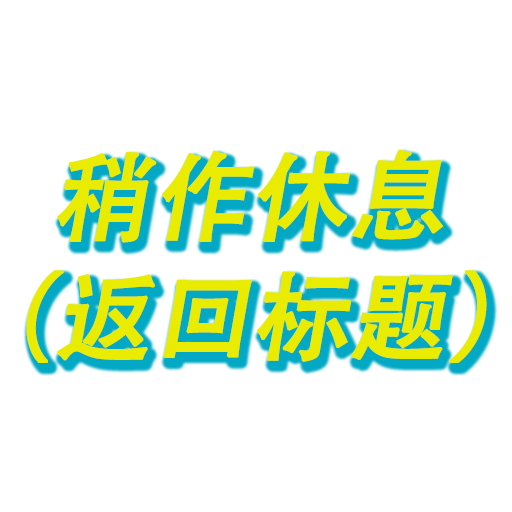
<style>
.page{position:relative;width:512px;height:512px;background:#ffffff}
.page>*{position:absolute;margin:0}
.t1{font:96px/120px "AdobeHeitiStd-Regular";color:#e9ec00;font-weight:bold;font-style:italic}
</style>
<div class="page">
<p class="t1" style="left:26px;top:149px;width:461px;height:214px">稍作休息<br>（返回标题）</p>
</div>
